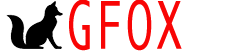
<style>
.page{position:relative;width:246px;height:52px;background:#ffffff}
.page>*{position:absolute;margin:0}
.t1{font:63px "Monaco";letter-spacing:0.08em;color:#f80505;scale:0.7 1}
</style>
<div class="page">
<p class="t1" style="left:69px;top:0px;width:113px;height:51px">GFOX</p>
</div>
